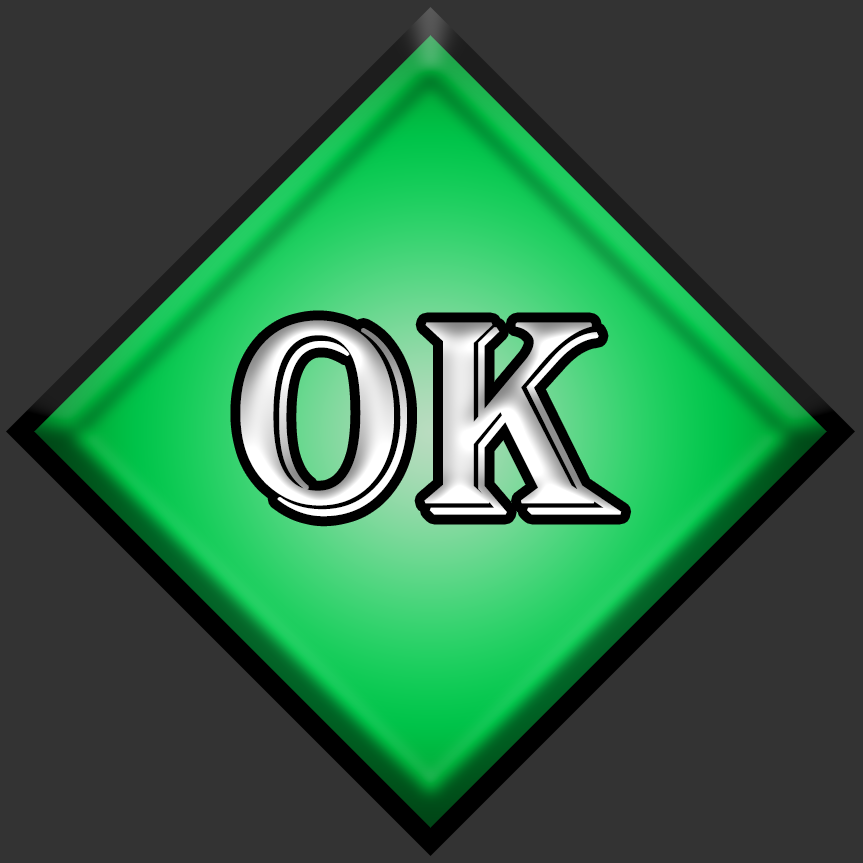
<style>
.page{position:relative;width:863px;height:863px;background:#333333}
.page>*{position:absolute;margin:0}
.t1{font:283.7px "Algerian";font-weight:bold}
</style>
<div class="page">
<p class="t1" style="left:240px;top:320px;width:382px;height:197px">OK</p>
</div>
